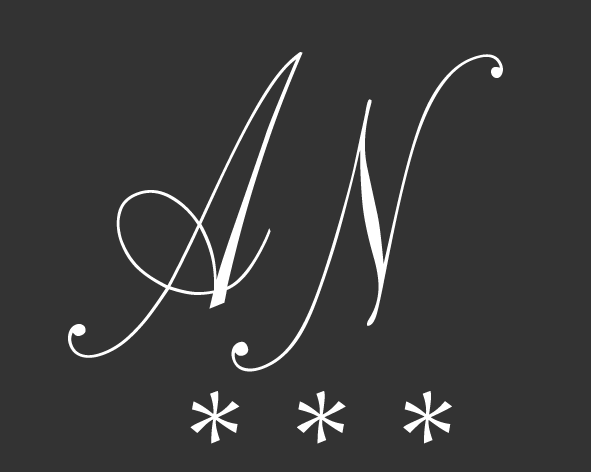
<style>
.page{position:relative;width:591px;height:472px;background:#333333}
.page>*{position:absolute;margin:0}
.t1{font:374.1px "PalaceScriptMT";color:#ffffff;scale:0.94 1}
.t2{font:300px "PalaceScriptMT";color:#ffffff}
</style>
<div class="page">
<p class="t1" style="left:68px;top:52px;width:235px;height:306px;rotate:-22deg">A</p>
<p class="t1" style="left:231px;top:54px;width:272px;height:318px;rotate:-22deg">N</p>
<p class="t2" style="left:190px;top:391px;width:262px;height:53px">* * *</p>
</div>
